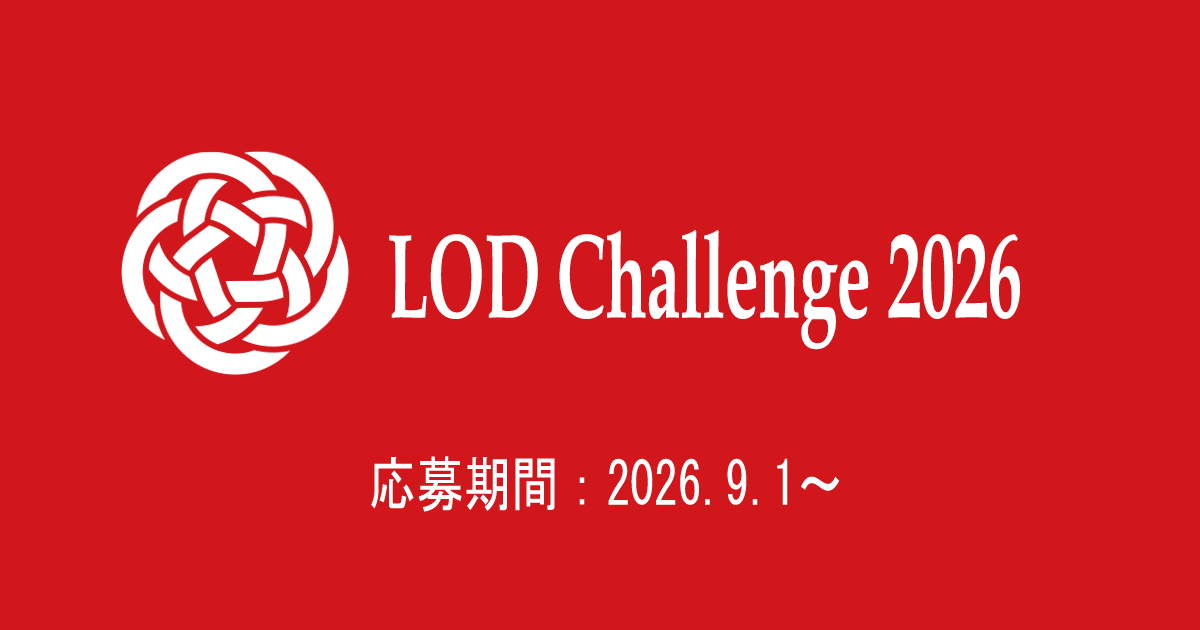
<style>
.page{position:relative;width:1200px;height:630px;background:#d1171c}
.page>*{position:absolute;margin:0}
.t1{font:120px "BookAntiqua-Bold";color:#ffffff;scale:0.56 1}
.t2{font:60px "MS-Gothic";color:#ffffff;scale:0.79 1}
</style>
<div class="page">
<p class="t1" style="left:389px;top:230px;width:631px;height:120px">LOD Challenge 2026</p>
<p class="t2" style="left:371px;top:456px;width:469px;height:56px">応募期間：2026.9.1～</p>
</div>
